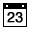
<style>
.page{position:relative;width:30px;height:30px;background:#ffffff}
.page>*{position:absolute;margin:0}
.t1{font:14px "HelveticaNeue";color:#000000;font-weight:bold}
</style>
<div class="page">
<p class="t1" style="left:7px;top:12px;width:16px;height:11px">23</p>
</div>
